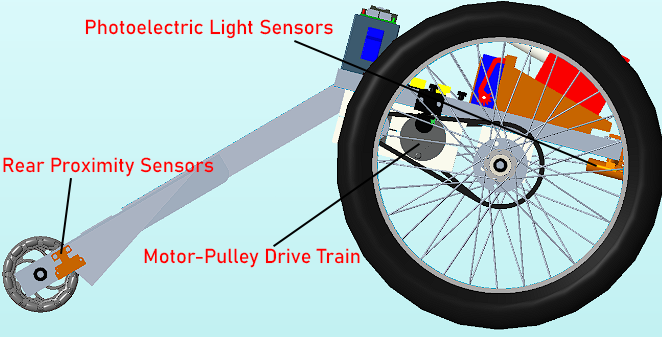
<style>
.page{position:relative;width:662px;height:337px}
.page>*{position:absolute;margin:0}
.t1{font:12px "Bahnschrift";color:#ff0000}
.t2{font:20px "Bahnschrift";color:#ff0000}
</style>
<div class="page">
<p class="t1" style="left:85px;top:19px;width:248px;height:20px">Photoelectric Light Sensors</p>
<p class="t1" style="left:3px;top:157px;width:211px;height:20px">Rear Proximity Sensors</p>
<p class="t2" style="left:144px;top:248px;width:216px;height:20px">Motor-Pulley Drive Train</p>
</div>
